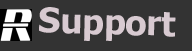
<style>
.page{position:relative;width:192px;height:51px;background:#333333}
.page>*{position:absolute;margin:0}
.t1{font:33.9px "Tahoma-Bold";color:#d8cad1}
</style>
<div class="page">
<p class="t1" style="left:39px;top:7px;width:137px;height:34px;rotate:2deg">Support</p>
</div>
